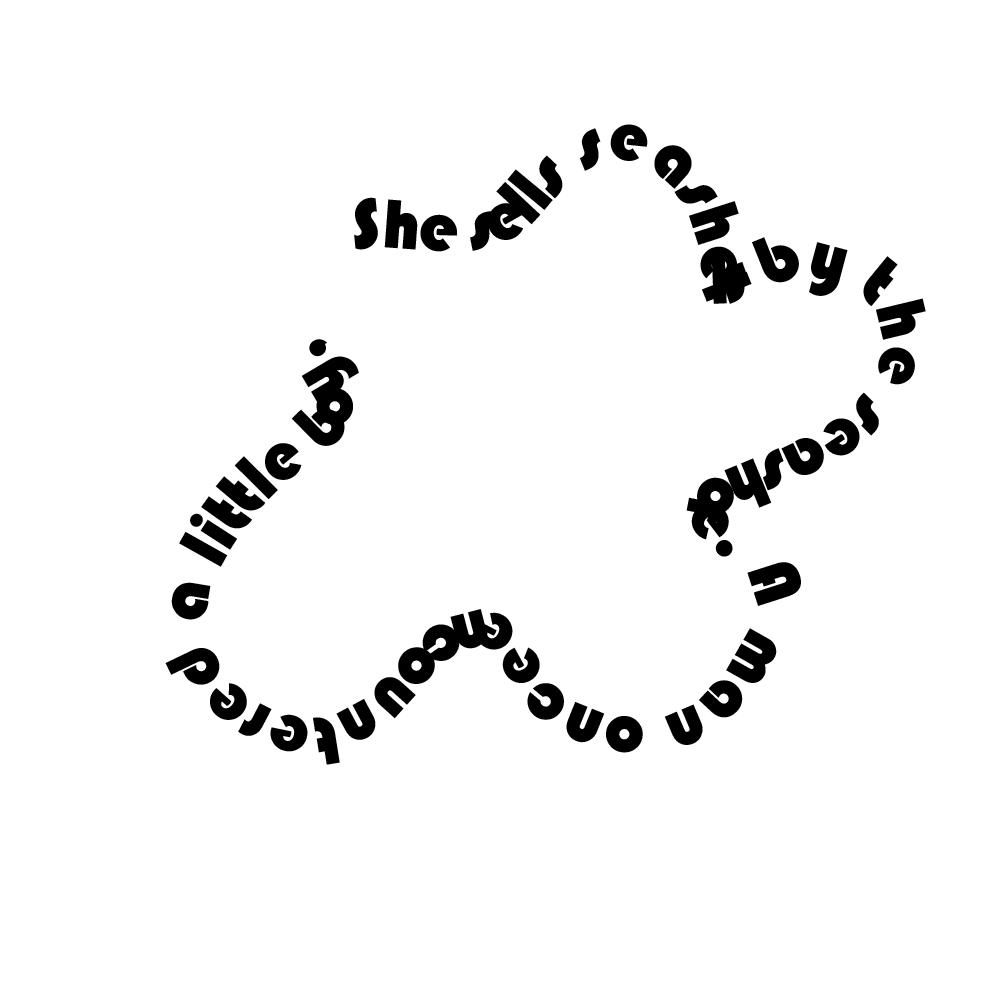
<style>
.page{position:relative;width:1000px;height:1000px;background:#ffffff}
.page>*{position:absolute;margin:0}
.t1{font:72px/30px "Bauhaus93";letter-spacing:-0.025em;color:#000000}
</style>
<div class="page">
<p class="t1" style="left:165px;top:124px;width:761px;height:641px;text-align:center">She sells seashells by the seashore. A man once encountered a little boy,</p>
</div>
